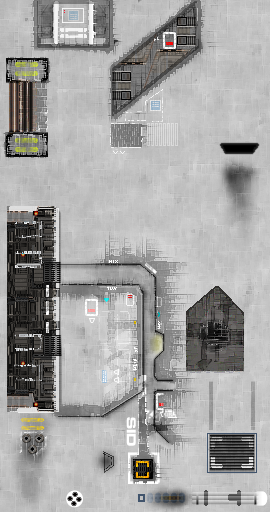
<style>
.page{position:relative;width:270px;height:512px}
.page>*{position:absolute;margin:0}
.t1{font:13.6px "MicrogrammaD-BoldExte";color:#ffffff}
</style>
<div class="page">
<p class="t1" style="left:126px;top:417px;width:10px;height:29px;rotate:90deg">SID</p>
</div>
